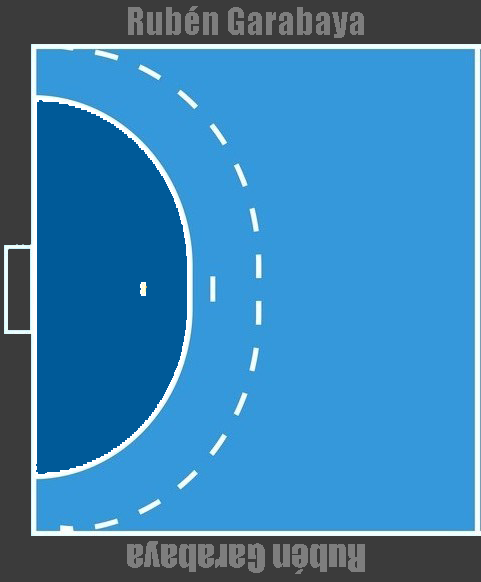
<style>
.page{position:relative;width:481px;height:582px;background:#3598db}
.page>*{position:absolute;margin:0}
.t1{font:36px "Impact";color:#7e7e7e}
</style>
<div class="page">
<p class="t1" style="left:128px;top:6px;width:236px;height:32px">Rubén Garabaya</p>
<p class="t1" style="left:127px;top:541px;width:238px;height:33px;rotate:180deg">Rubén Garabaya</p>
</div>
